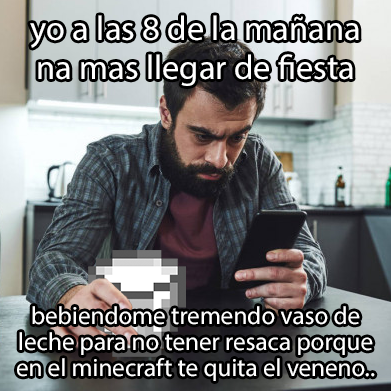
<style>
.page{position:relative;width:391px;height:391px}
.page>*{position:absolute;margin:0}
.t1{font:34.6px "MyriadPro-Regular";color:#ffffff}
.t2{font:25.1px "MyriadPro-Regular";color:#ffffff}
</style>
<div class="page">
<p class="t1" style="left:30px;top:15px;width:329px;height:71px;text-align:center">yo a las 8 de la mañana<br>na mas llegar de fiesta</p>
<p class="t2" style="left:17px;top:306px;width:358px;height:75px;text-align:center">bebiendome tremendo vaso de<br>leche para no tener resaca porque<br>en el minecraft te quita el veneno..</p>
</div>
